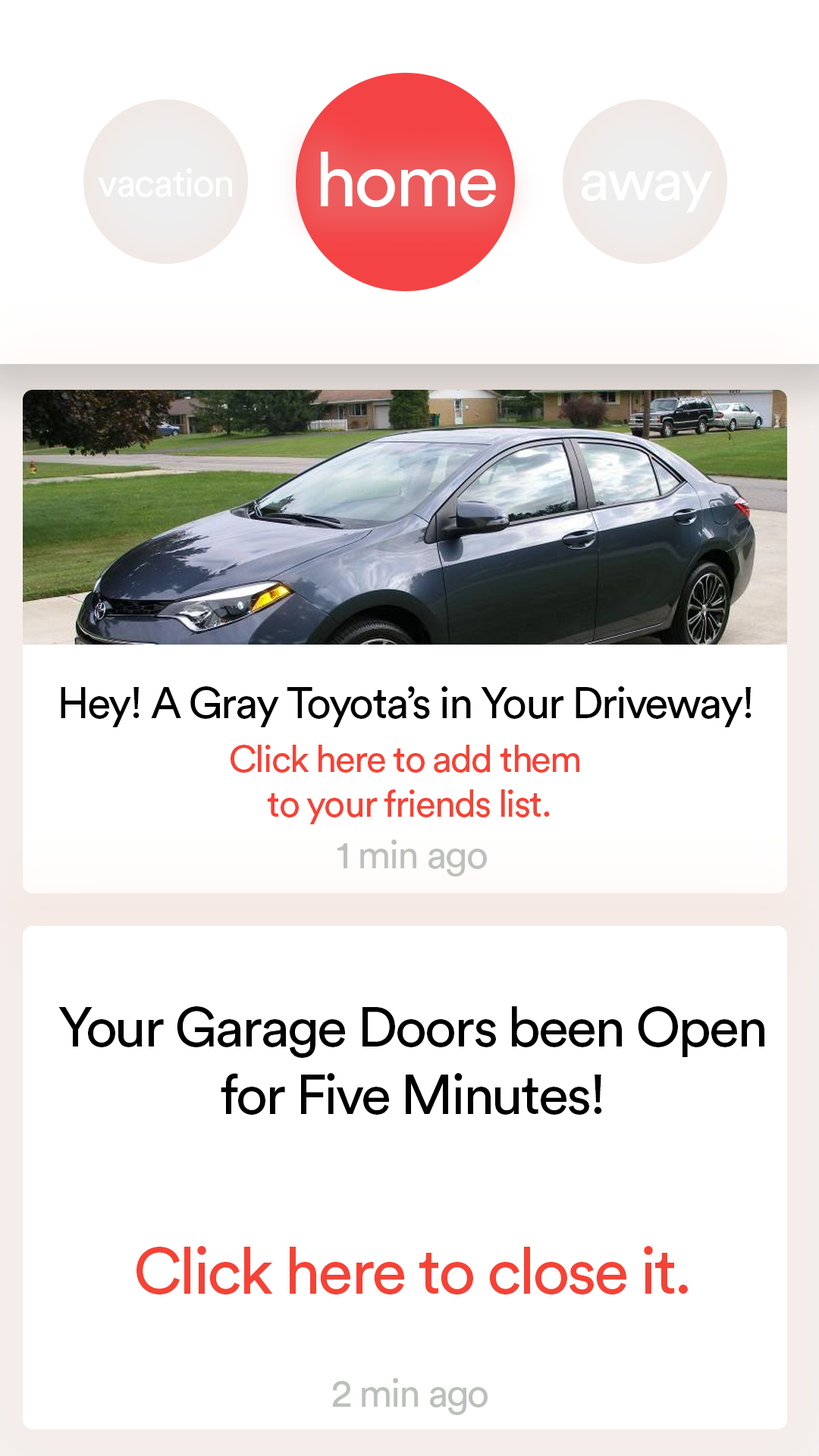
<style>
.page{position:relative;width:819px;height:1456px;background:#ffffff}
.page>*{position:absolute;margin:0}
.t1{font:76.2px "CircularStd-Book";letter-spacing:-0.04em;color:#ffffff}
.t2{font:38.8px "CircularStd-Book";letter-spacing:-0.04em;color:#ffffff}
.t3{font:59.9px "CircularStd-Book";letter-spacing:-0.04em;color:#ffffff}
.t4{font:43.8px "CircularStd-Book";letter-spacing:-0.04em;color:#000000}
.t5{font:37.6px "CircularStd-Book";letter-spacing:-0.04em;color:#f44336}
.t6{font:39px "CircularStd-Book";letter-spacing:-0.04em;color:#bbc0ba}
.t7{font:55.9px "CircularStd-Book";letter-spacing:-0.04em;color:#000000}
.t8{font:65.1px "CircularStd-Book";letter-spacing:-0.04em;color:#f44336}
</style>
<div class="page">
<p class="t1" style="left:321px;top:152px;width:175px;height:56px">home</p>
<p class="t2" style="left:98px;top:168px;width:134px;height:29px">vacation</p>
<p class="t3" style="left:582px;top:171px;width:130px;height:41px">away</p>
<p class="t4" style="left:61px;top:686px;width:690px;height:41px">Hey! A Gray Toyota’s in Your Driveway!</p>
<p class="t5" style="left:231px;top:745px;width:348px;height:79px;text-align:center">Click here to add them <br>to your friends list.</p>
<p class="t6" style="left:337px;top:839px;width:150px;height:38px">1 min ago</p>
<p class="t7" style="left:58px;top:1006px;width:706px;height:109px;text-align:center">Your Garage Doors been Open<br>for Five Minutes!</p>
<p class="t8" style="left:136px;top:1246px;width:552px;height:48px">Click here to close it.</p>
<p class="t6" style="left:332px;top:1378px;width:156px;height:37px">2 min ago</p>
</div>
